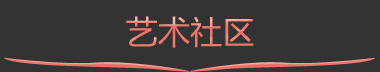
<style>
.page{position:relative;width:380px;height:72px;background:#333333}
.page>*{position:absolute;margin:0}
.t1{font:32.3px "MicrosoftYaHei";color:#f2766c}
</style>
<div class="page">
<p class="t1" style="left:126px;top:16px;width:128px;height:32px">艺术社区</p>
</div>
